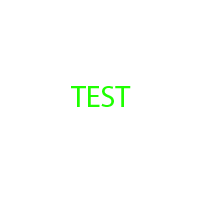
<style>
.page{position:relative;width:200px;height:200px;background:#ffffff}
.page>*{position:absolute;margin:0}
.t1{font:30px "MyriadPro-Regular";color:#1eff00}
</style>
<div class="page">
<p class="t1" style="left:71px;top:86px;width:60px;height:21px">TEST</p>
</div>
